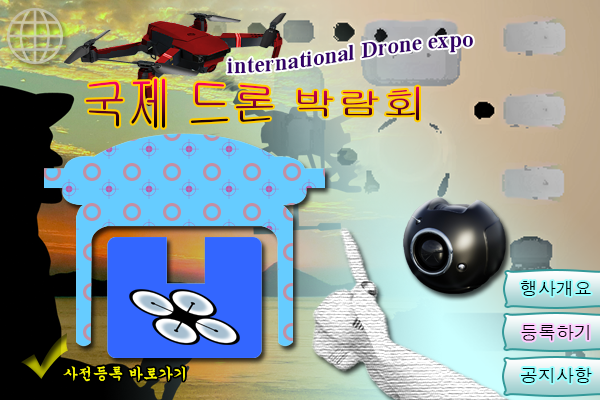
<style>
.page{position:relative;width:600px;height:400px}
.page>*{position:absolute;margin:0}
.t1{font:22.9px "TimesNewRomanPS-BoldMT";color:#330066}
.t2{font:45px "Gulim"}
.t3{font:17.8px "Dotum";color:#000000}
.t4{font:14.8px "Gungsuh";color:#ffff00}
</style>
<div class="page">
<p class="t1" style="left:227px;top:35px;width:246px;height:39px">international Drone expo</p>
<p class="t2" style="left:86px;top:78px;width:333px;height:50px">국제 드론 박람회</p>
<p class="t3" style="left:521px;top:281px;width:70px;height:15px">행사개요</p>
<p class="t3" style="left:521px;top:325px;width:68px;height:16px">등록하기</p>
<p class="t4" style="left:63px;top:366px;width:122px;height:16px">사전등록 바로가기</p>
<p class="t3" style="left:521px;top:368px;width:71px;height:15px">공지사항</p>
</div>
